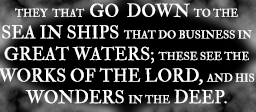
<style>
.page{position:relative;width:256px;height:112px;background:#000000}
.page>*{position:absolute;margin:0}
.t1{font:11px "IM_FELL_Double_Pica_SC";color:#ffffff}
.t2{font:18px "IM_FELL_Double_Pica_SC";color:#ffffff}
.t3{font:12px "IM_FELL_Double_Pica_SC";color:#ffffff}
</style>
<div class="page">
<p class="t1" style="left:0px;top:3px;width:255px;height:101px;text-align:center">THEY  THAT  <span class="t2">GO  DOWN </span>TO THE<span class="t3"> <br></span><span class="t2">SEA IN SHIPS  </span>THAT DO BUSINESS IN <span class="t2">GREAT WATERS; </span>THESE SEE THE<span class="t2"> WORKS OF THE LORD, </span>AND HIS<br><span class="t2">WONDERS </span>IN THE<span class="t2"> DEEP.</span></p>
</div>
